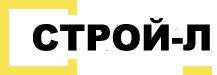
<style>
.page{position:relative;width:217px;height:75px;background:#ffffff}
.page>*{position:absolute;margin:0}
.t1{font:36px "Arial-Black";color:#000000}
</style>
<div class="page">
<p class="t1" style="left:33px;top:18px;width:177px;height:33px">СТРОЙ-Л</p>
</div>
